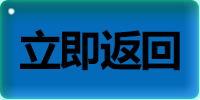
<style>
.page{position:relative;width:200px;height:100px;background:#036bba}
.page>*{position:absolute;margin:0}
.t1{font:42.3px "MicrosoftYaHei-Bold";letter-spacing:-0.05em;color:#000000}
</style>
<div class="page">
<p class="t1" style="left:20px;top:29px;width:160px;height:42px">立即返回</p>
</div>
